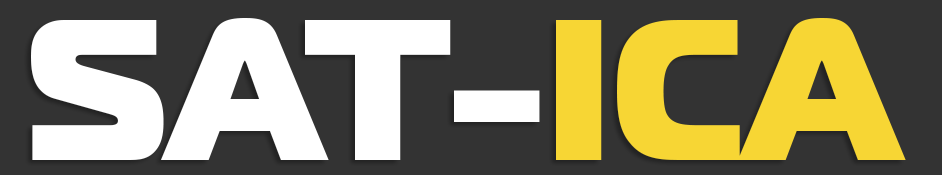
<style>
.page{position:relative;width:942px;height:175px;background:#333333}
.page>*{position:absolute;margin:0}
.t1{font:200px "MagistralBlack";color:#ffffff}
.t2{font:200px "MagistralBlack";color:#f7d634}
</style>
<div class="page">
<p class="t1" style="left:31px;top:18px;width:875px;height:142px">SAT-<span class="t2">ICA</span></p>
</div>
